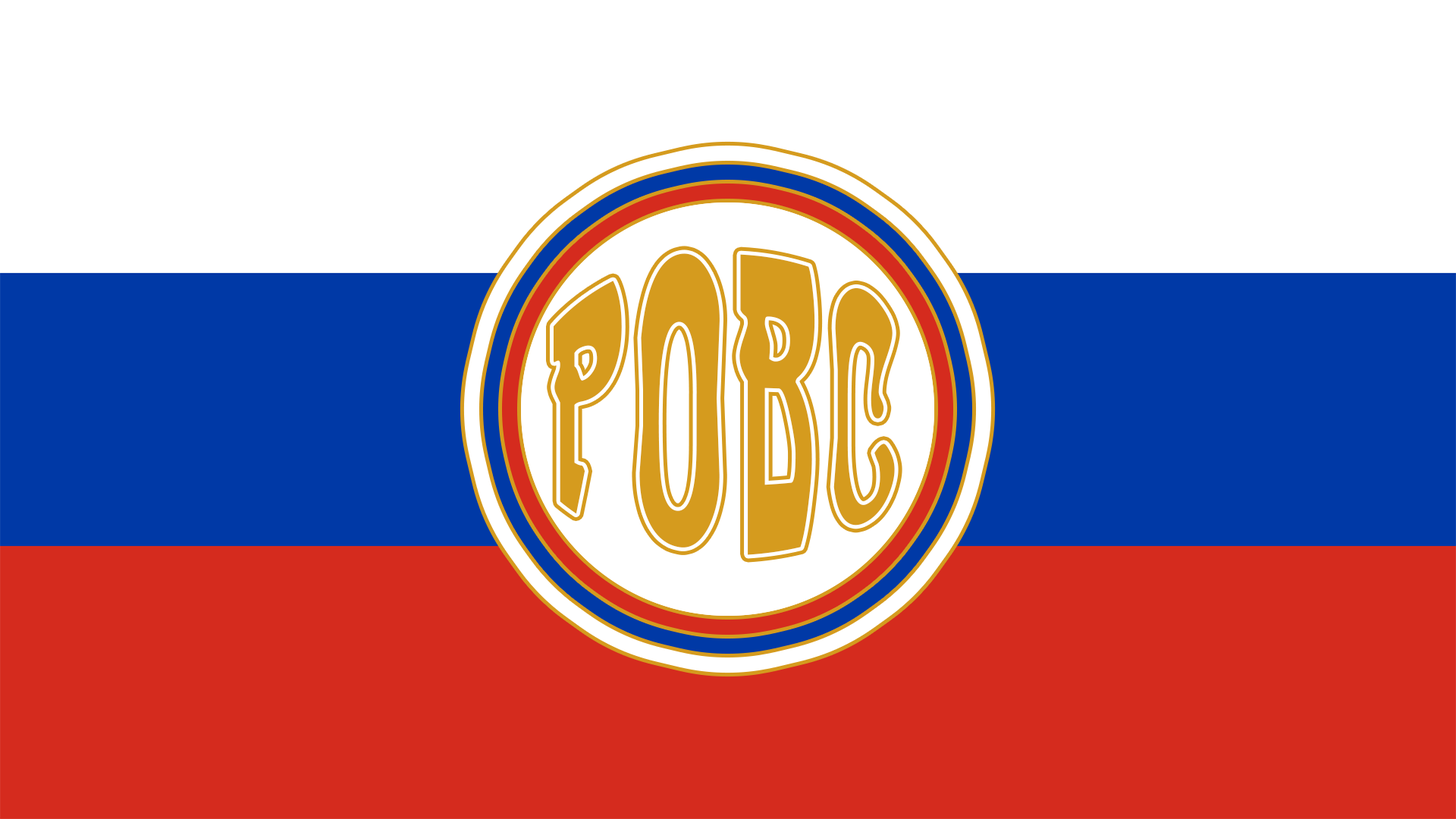
<style>
.page{position:relative;width:1456px;height:819px;background:#ffffff}
.page>*{position:absolute;margin:0}
.t1{font:206px "Traktir-Modern";letter-spacing:0.05em;color:#d59b1e}
</style>
<div class="page">
<p class="t1" style="left:554px;top:253px;width:341px;height:302px">РОВС</p>
</div>
